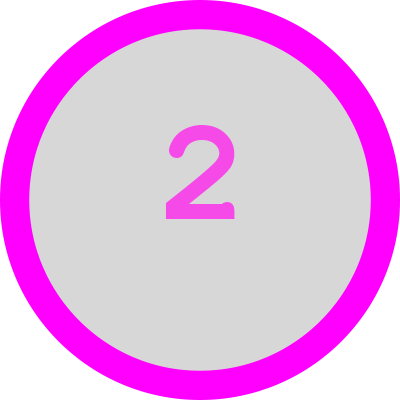
<style>
.page{position:relative;width:400px;height:400px;background:#d7d7d7}
.page>*{position:absolute;margin:0}
.t1{font:150px "CourierNewPS-BoldMT";color:#f64ae8}
</style>
<div class="page">
<p class="t1" style="left:165px;top:125px;width:70px;height:94px">2</p>
</div>
